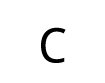
<style>
.page{position:relative;width:105px;height:83px;background:#ffffff}
.page>*{position:absolute;margin:0}
.t1{font:47.9px "DroidSans";color:#000000}
</style>
<div class="page">
<p class="t1" style="left:41px;top:27px;width:25px;height:36px">C</p>
</div>
